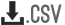
<style>
.page{position:relative;width:65px;height:25px;background:#ffffff}
.page>*{position:absolute;margin:0}
.t1{font:25.3px "OstrichSans-Black";color:#636363}
</style>
<div class="page">
<p class="t1" style="left:26px;top:4px;width:36px;height:19px">.CSV</p>
</div>
